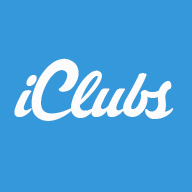
<style>
.page{position:relative;width:192px;height:192px;background:#3498db}
.page>*{position:absolute;margin:0}
.t1{font:87.1px "MastocPersonalUseOnly";color:#fcfcfc}
</style>
<div class="page">
<p class="t1" style="left:14px;top:58px;width:160px;height:63px">iClubs</p>
</div>
